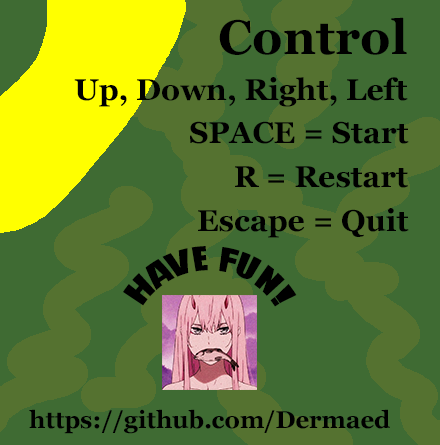
<style>
.page{position:relative;width:440px;height:445px;background:#3f6b33}
.page>*{position:absolute;margin:0}
.t1{font:48px "Georgia-Bold";color:#000000}
.t2{font:30px "Georgia-Bold";color:#000000}
.t3{font:30px "Impact";color:#000000}
.t4{font:24px "Georgia-Bold";color:#000000}
</style>
<div class="page">
<p class="t1" style="left:219px;top:17px;width:188px;height:38px">Control</p>
<p class="t2" style="left:74px;top:77px;width:334px;height:30px">Up, Down, Right, Left</p>
<p class="t2" style="left:190px;top:121px;width:219px;height:23px">SPACE = Start</p>
<p class="t2" style="left:235px;top:166px;width:173px;height:22px">R = Restart</p>
<p class="t2" style="left:198px;top:208px;width:211px;height:30px">Escape = Quit</p>
<p class="t3" style="left:123px;top:246px;width:174px;height:61px">HAVE FUN!</p>
<p class="t4" style="left:29px;top:409px;width:361px;height:25px">https://github.com/Dermaed</p>
</div>
